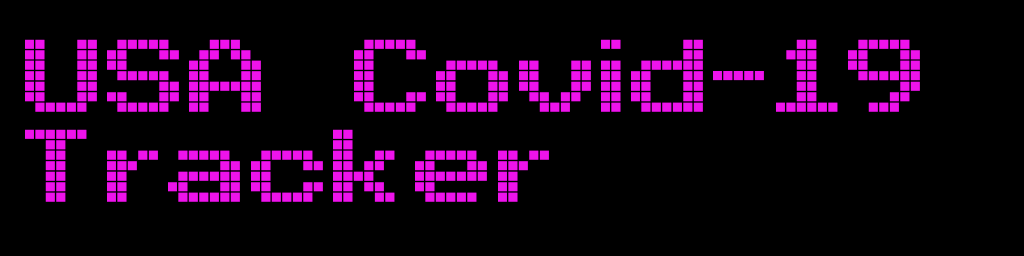
<style>
.page{position:relative;width:1024px;height:256px;background:#000000}
.page>*{position:absolute;margin:0}
.t1{font:158.4px "Arcade";color:#ee13eb}
</style>
<div class="page">
<p class="t1" style="left:25px;top:39px;width:895px;height:163px">USA Covid-19<br>Tracker</p>
</div>
